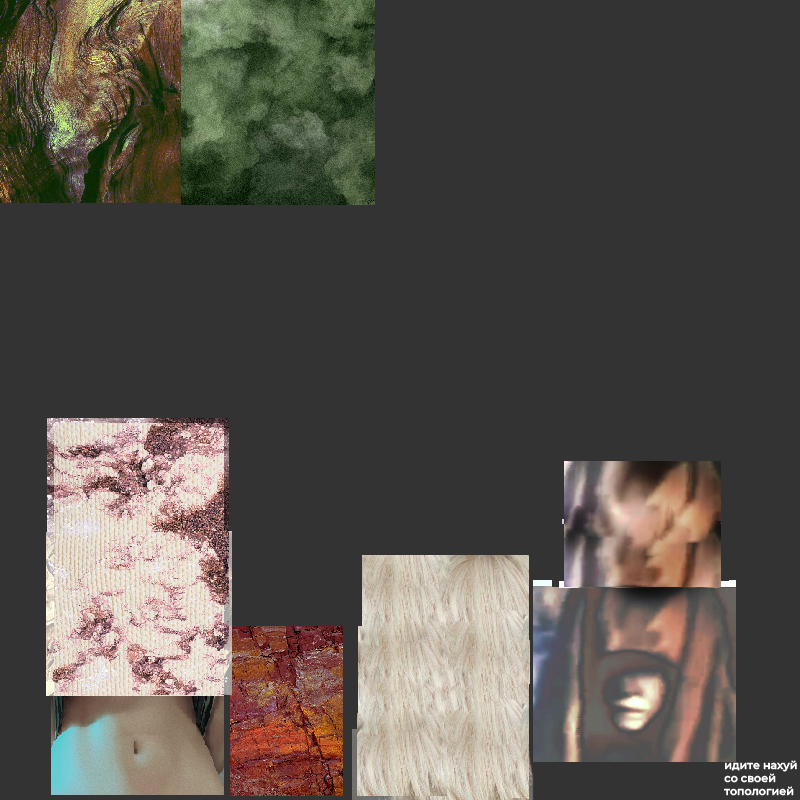
<style>
.page{position:relative;width:800px;height:800px;background:#333333}
.page>*{position:absolute;margin:0}
.t1{font:11px "MontserratRoman-SemiBold";color:#ffffff}
</style>
<div class="page">
<p class="t1" style="left:724px;top:760px;width:73px;height:36px">идите нахуй<br>со своей   <br>топологией</p>
</div>
